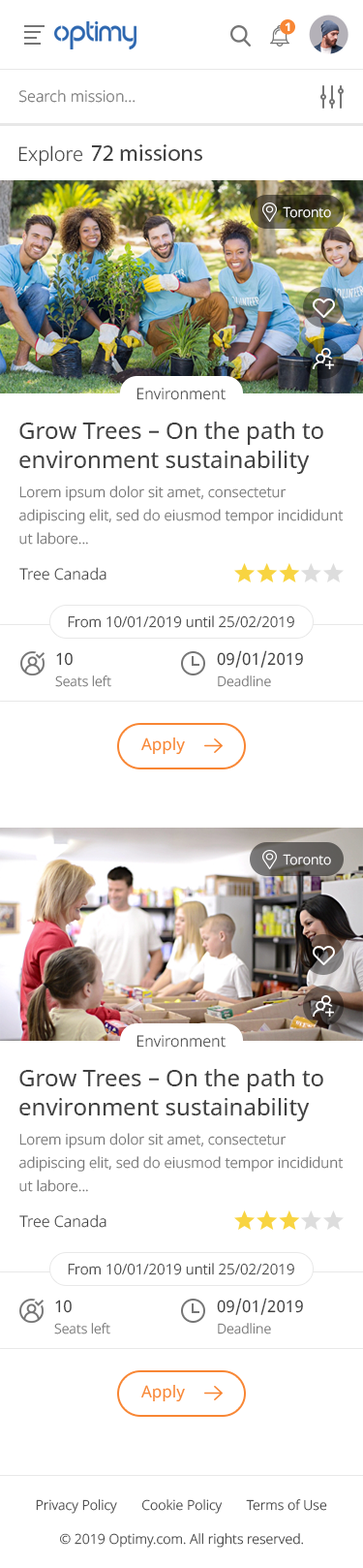
<style>
.page{position:relative;width:363px;height:1568px;background:#ffffff}
.page>*{position:absolute;margin:0}
.t1{font:11.6px "NotoSans-ExtraBold";color:#ffffff}
.t2{font:15.5px "NotoSans-Light";color:#757575}
.t3{font:23.3px "MyriadPro-Regular";color:#414141}
.t4{font:19.4px "NotoSans-Light";color:#414141}
.t5{font:13.6px "NotoSans-Light";color:#ffffff}
.t6{font:15.5px "NotoSans-Light";color:#414141}
.t7{font:23.3px/29.1px "NotoSans";color:#414141}
.t8{font:14.5px/23.3px "NotoSans-Light";color:#757575}
.t9{font:14.5px "NotoSans-Light";color:#414141}
.t10{font:13.6px/21.3px "NotoSans-Light";color:#757575}
.t11{font:16.5px/21.3px "NotoSans";color:#414141}
.t12{font:16.5px "NotoSans-Regular";color:#f88634}
.t13{font:13.6px "NotoSans-Light";color:#414141}
</style>
<div class="page">
<p class="t1" style="left:285px;top:22px;width:6px;height:10px">1</p>
<p class="t2" style="left:18px;top:89px;width:118px;height:14px">Search mission...</p>
<p class="t3" style="left:18px;top:144px;width:185px;height:22px"><span class="t4">Explore </span>72 missions</p>
<p class="t5" style="left:283px;top:206px;width:48px;height:12px">Toronto</p>
<p class="t6" style="left:137px;top:388px;width:89px;height:12px">Environment</p>
<p class="t7" style="left:19px;top:422px;width:305px;height:52px">Grow Trees – On the path to<br>environment sustainability</p>
<p class="t8" style="left:19px;top:486px;width:325px;height:59px">Lorem ipsum dolor sit amet, consectetur adipiscing elit, sed do eiusmod tempor incididunt ut labore...</p>
<p class="t6" style="left:19px;top:567px;width:88px;height:13px">Tree Canada</p>
<p class="t9" style="left:68px;top:615px;width:227px;height:13px">From 10/01/2019 until 25/02/2019</p>
<p class="t10" style="left:55px;top:652px;width:56px;height:35px"><span class="t11">10<br></span>Seats left</p>
<p class="t11" style="left:217px;top:650px;width:86px;height:37px">09/01/2019<br><span class="t10">Deadline</span></p>
<p class="t12" style="left:141px;top:737px;width:44px;height:18px">Apply</p>
<p class="t5" style="left:283px;top:854px;width:48px;height:11px">Toronto</p>
<p class="t6" style="left:137px;top:1035px;width:89px;height:13px">Environment</p>
<p class="t7" style="left:19px;top:1069px;width:305px;height:52px">Grow Trees – On the path to<br>environment sustainability</p>
<p class="t8" style="left:19px;top:1133px;width:325px;height:59px">Lorem ipsum dolor sit amet, consectetur adipiscing elit, sed do eiusmod tempor incididunt ut labore...</p>
<p class="t6" style="left:19px;top:1214px;width:88px;height:14px">Tree Canada</p>
<p class="t9" style="left:68px;top:1263px;width:227px;height:12px">From 10/01/2019 until 25/02/2019</p>
<p class="t10" style="left:54px;top:1300px;width:56px;height:34px"><span class="t11">10<br></span>Seats left</p>
<p class="t11" style="left:217px;top:1298px;width:86px;height:36px">09/01/2019<br><span class="t10">Deadline</span></p>
<p class="t12" style="left:141px;top:1385px;width:44px;height:17px">Apply</p>
<p class="t13" style="left:36px;top:1499px;width:292px;height:15px">Privacy Policy       Cookie Policy       Terms of Use</p>
<p class="t13" style="left:60px;top:1533px;width:243px;height:15px">© 2019 Optimy.com. All rights reserved.</p>
</div>
